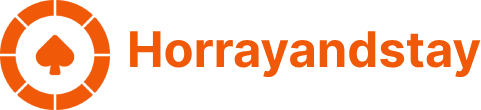
<style>
.page{position:relative;width:481px;height:110px;background:#ffffff}
.page>*{position:absolute;margin:0}
.t1{font:49px "Inter-Bold";color:#f05907}
</style>
<div class="page">
<p class="t1" style="left:130px;top:31px;width:351px;height:47px">Horrayandstay</p>
</div>
